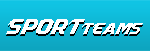
<style>
.page{position:relative;width:150px;height:51px}
.page>*{position:absolute;margin:0}
.t1{font:20.4px "Masque";color:#ffffff;text-transform:uppercase;font-style:italic}
.t2{font:15.3px "Masque";color:#ffffff;text-transform:uppercase;font-style:italic}
</style>
<div class="page">
<p class="t1" style="left:6px;top:19px;width:137px;height:15px">Sport<span class="t2">Teams</span></p>
</div>
